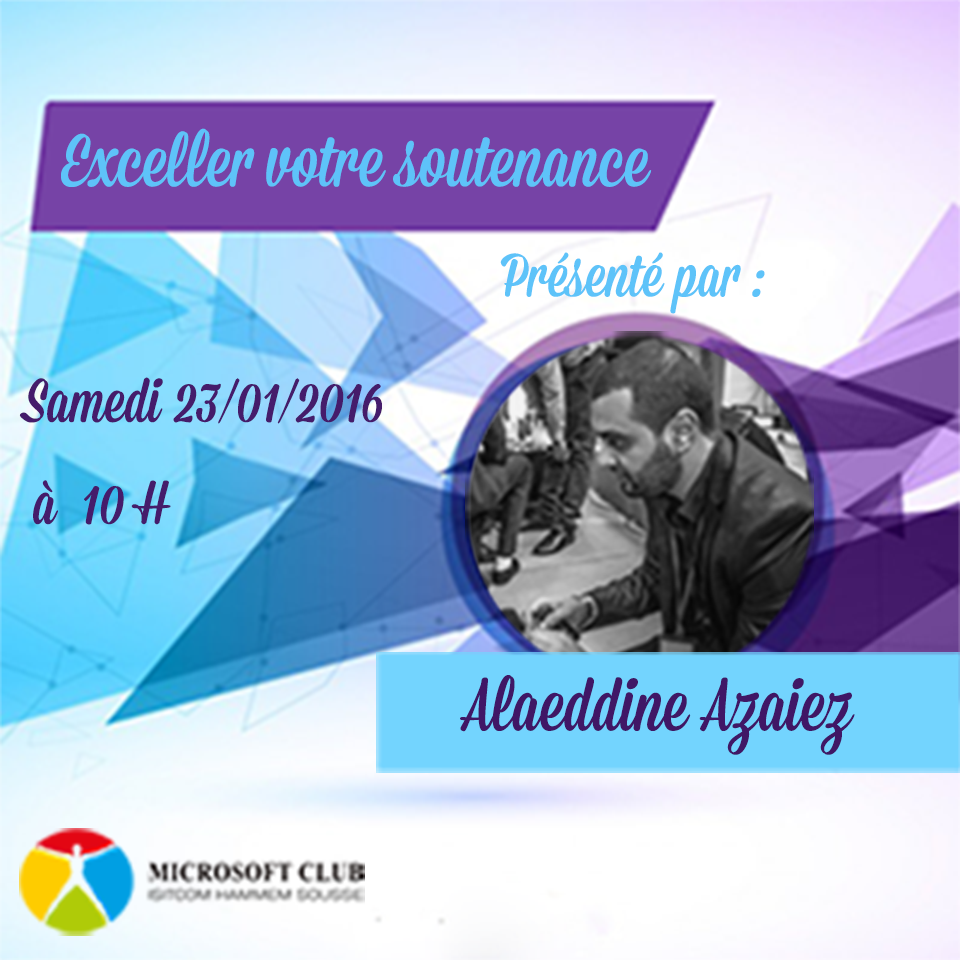
<style>
.page{position:relative;width:960px;height:960px}
.page>*{position:absolute;margin:0}
.t1{font:73.6px "Mission-Script";color:#5ec3f9}
.t2{font:61.3px "Mission-Script";color:#5ec3f9}
.t3{font:61.3px "Mission-Script";color:#451c6b}
.t4{font:73.6px "Mission-Script";color:#401766}
</style>
<div class="page">
<p class="t1" style="left:61px;top:128px;width:591px;height:59px">Exceller votre soutenance</p>
<p class="t2" style="left:500px;top:252px;width:265px;height:62px">Présenté par :</p>
<p class="t3" style="left:19px;top:377px;width:363px;height:47px">Samedi 23/01/2016</p>
<p class="t3" style="left:33px;top:480px;width:138px;height:45px">à  10 H</p>
<p class="t4" style="left:460px;top:675px;width:395px;height:80px">Alaeddine Azaiez</p>
</div>
